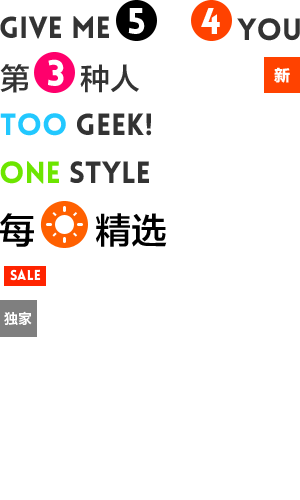
<style>
.page{position:relative;width:300px;height:500px;background:#ffffff}
.page>*{position:absolute;margin:0}
.t1{font:30px "FZLTZHK--GBK1-0";color:#333333}
.t2{font:36px "Lovelo-Black";color:#ffffff}
.t3{font:16px "FZLTTHK--GBK1-0";color:#ffffff}
.t4{font:30px "Lovelo-Black";color:#333333}
.t5{font:30px "Lovelo-Black";color:#22c8ff}
.t6{font:30px "Lovelo-Black";color:#6ce500}
.t7{font:36px "FZLTZHK--GBK1-0";color:#000000}
.t8{font:14px "HiraginoSansGB-W6";color:#ffffff}
</style>
<div class="page">
<p class="t1" style="left:0px;top:64px;width:139px;height:29px">第      种人</p>
<p class="t2" style="left:48px;top:59px;width:16px;height:27px">3</p>
<p class="t3" style="left:274px;top:67px;width:16px;height:16px">新</p>
<p class="t4" style="left:0px;top:113px;width:152px;height:23px"><span class="t5">TOO</span> GEEK!</p>
<p class="t4" style="left:0px;top:161px;width:149px;height:23px"><span class="t6">ONE</span> style</p>
<p class="t7" style="left:0px;top:213px;width:167px;height:34px">每      精选</p>
<p class="t8" style="left:4px;top:311px;width:28px;height:14px">独家</p>
</div>
